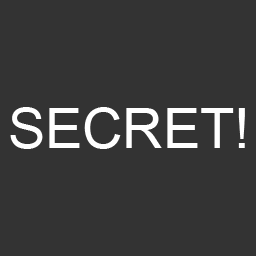
<style>
.page{position:relative;width:256px;height:256px;background:#333333}
.page>*{position:absolute;margin:0}
.t1{font:55.8px "ArialMT";color:#ffffff}
</style>
<div class="page">
<p class="t1" style="left:10px;top:107px;width:235px;height:42px">SECRET!</p>
</div>
